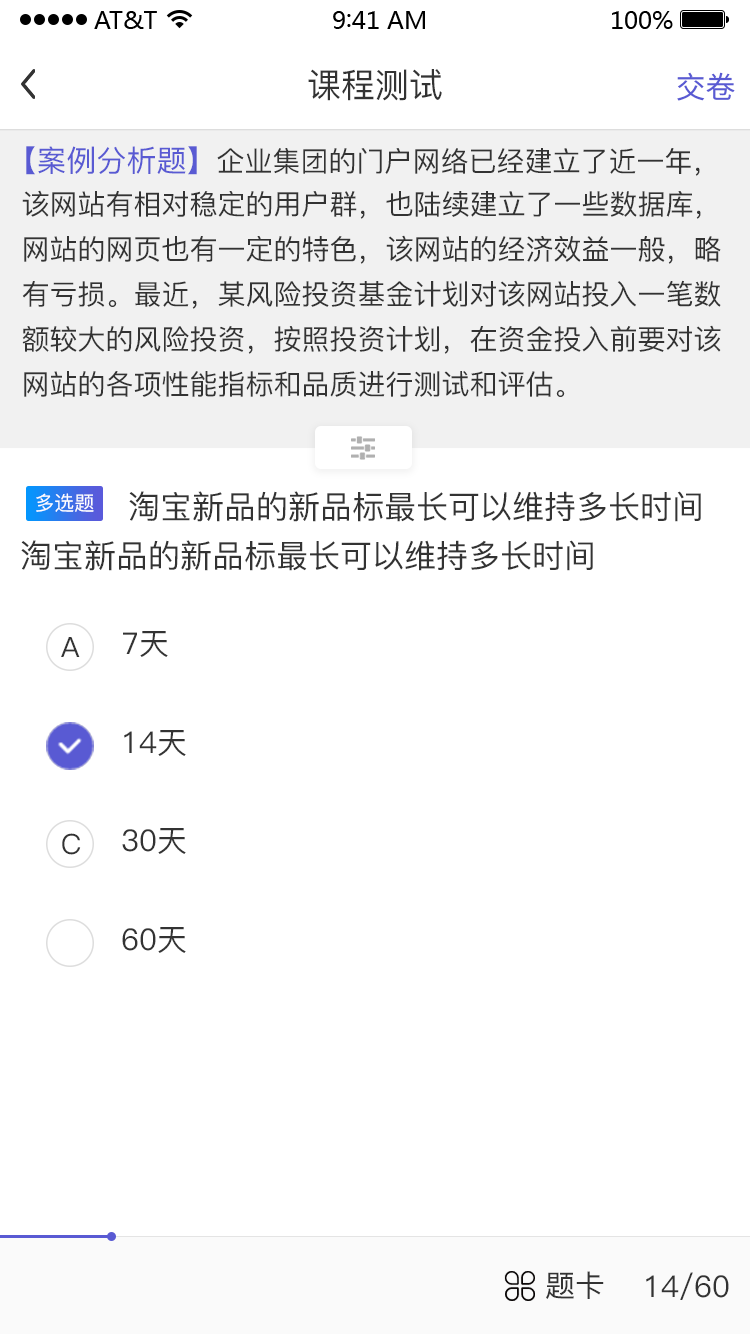
<style>
.page{position:relative;width:750px;height:1334px;background:#ffffff}
.page>*{position:absolute;margin:0}
.t1{font:34px "PingFang-SC-Medium";color:#333333}
.t2{font:30px "SourceHanSansCN-Regular";color:#595ad3}
.t3{font:28px/45px "PingFang-SC-Medium";color:#333333}
.t4{font:30px/45px "PingFang-SC-Medium";color:#595ad3}
.t5{font:20px "PingFang-SC-Medium";color:#ffffff}
.t6{font:32px "PingFang-SC-Medium";color:#333333}
.t7{font:28px "PingFang-SC-Medium";color:#333333}
.t8{font:30px "PingFang-SC-Medium";color:#333333}
</style>
<div class="page">
<p class="t1" style="left:308px;top:69px;width:134px;height:32px">课程测试</p>
<p class="t2" style="left:677px;top:72px;width:58px;height:29px">交卷</p>
<p class="t3" style="left:22px;top:146px;width:699px;height:251px"><span class="t4">【案例分析题】</span>企业集团的门户网络已经建立了近一年，该网站有相对稳定的用户群，也陆续建立了一些数据库，网站的网页也有一定的特色，该网站的经济效益一般，略有亏损。最近，某风险投资基金计划对该网站投入一笔数额较大的风险投资，按照投资计划，在资金投入前要对该网站的各项性能指标和品质进行测试和评估。</p>
<p class="t5" style="left:36px;top:493px;width:58px;height:19px">多选题</p>
<p class="t6" style="left:129px;top:491px;width:572px;height:31px">淘宝新品的新品标最长可以维持多长时间</p>
<p class="t6" style="left:21px;top:540px;width:572px;height:31px">淘宝新品的新品标最长可以维持多长时间</p>
<p class="t7" style="left:61px;top:637px;width:19px;height:20px">A</p>
<p class="t8" style="left:123px;top:631px;width:45px;height:26px">7天</p>
<p class="t8" style="left:124px;top:730px;width:62px;height:26px">14天</p>
<p class="t7" style="left:62px;top:833px;width:19px;height:22px">C</p>
<p class="t8" style="left:122px;top:828px;width:64px;height:26px">30天</p>
<p class="t8" style="left:122px;top:927px;width:64px;height:26px">60天</p>
<p class="t8" style="left:546px;top:1271px;width:58px;height:28px">题卡</p>
<p class="t8" style="left:646px;top:1272px;width:83px;height:28px">14/60</p>
</div>
